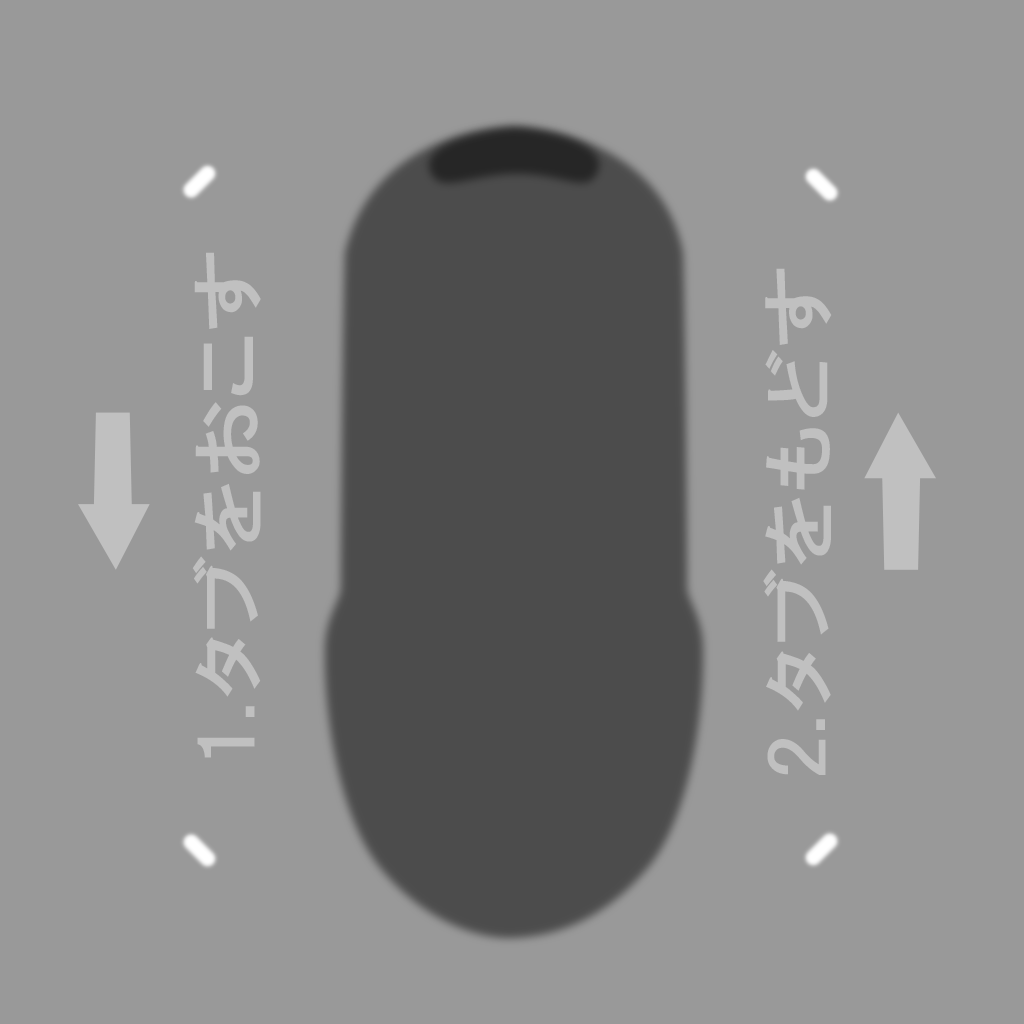
<style>
.page{position:relative;width:1024px;height:1024px;background:#999999}
.page>*{position:absolute;margin:0}
.t1{font:71.7px "HGPGothicE";color:#c0c0c0;scale:1.2 1}
</style>
<div class="page">
<p class="t1" style="left:192px;top:252px;width:69px;height:506px;rotate:-90deg">1.タブをおこす</p>
<p class="t1" style="left:763px;top:268px;width:69px;height:507px;rotate:-90deg">2.タブをもどす</p>
</div>
